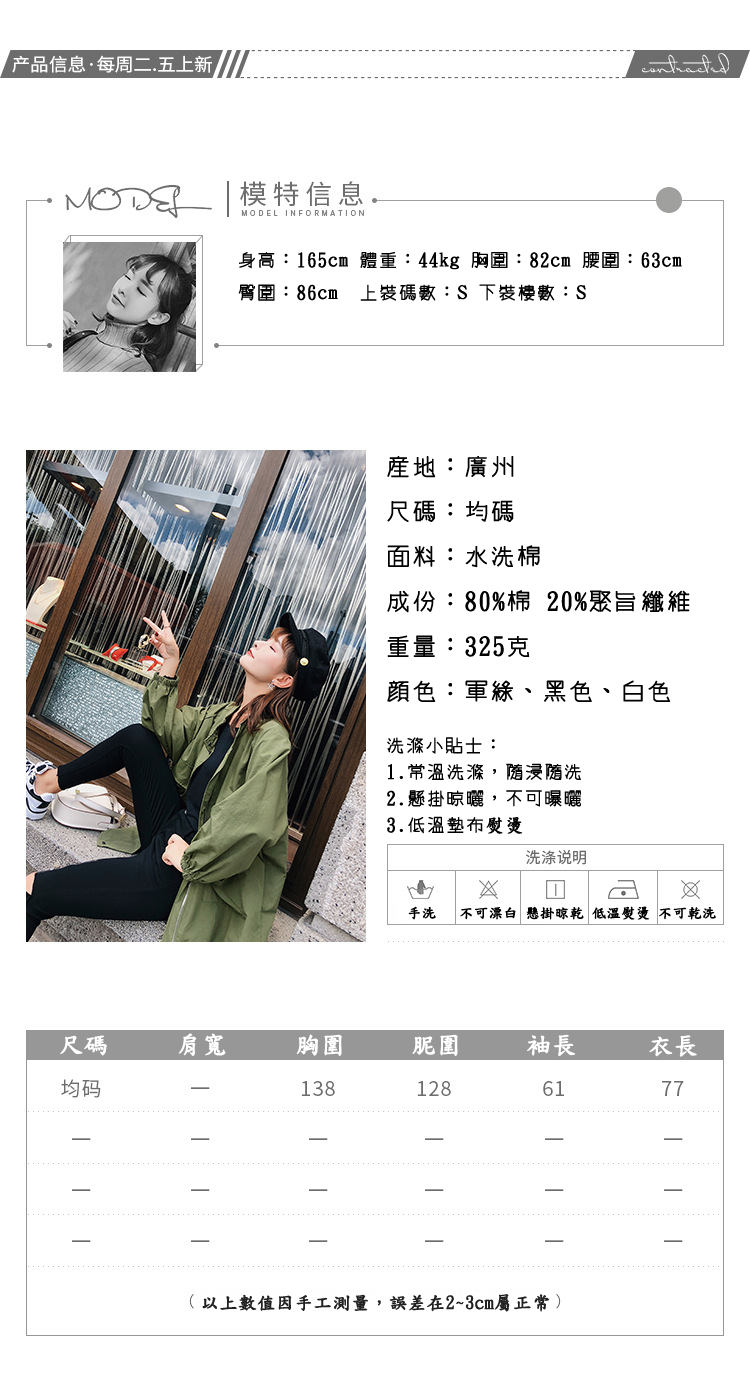
<style>
.page{position:relative;width:750px;height:1394px;background:#ffffff}
.page>*{position:absolute;margin:0}
.t1{font:18px "winman-tun33014";letter-spacing:0.05em;color:#000000;font-weight:bold}
.t2{font:24px "winman-tun33014";letter-spacing:0.05em;color:#000000;font-weight:bold}
.t3{font:18px "DFKaiShu-SB-Estd-BF";letter-spacing:0.05em;color:#000000;font-weight:bold}
.t4{font:14px "DFKaiShu-SB-Estd-BF";letter-spacing:0.01em;color:#000000;font-weight:bold}
.t5{font:24px "DFKaiShu-SB-Estd-BF";letter-spacing:0.01em;color:#ffffff;font-weight:bold}
.t6{font:18px "DFKaiShu-SB-Estd-BF";letter-spacing:0.01em;color:#212121;font-weight:bold}
</style>
<div class="page">
<p class="t1" style="left:238px;top:252px;width:444px;height:49px">身高：165cm 體重：44kg 胸圍：82cm 腰圍：63cm<br><br><br>臀圍：86cm  上裝碼數：S 下裝樓數：S</p>
<p class="t2" style="left:387px;top:456px;width:303px;height:246px">產地：廣州<br>尺碼：均碼<br>面料：水洗棉<br>成份：80%棉 20%聚旨纖維<br>重量：325克<br>顏色：軍綠、黑色、白色</p>
<p class="t1" style="left:387px;top:737px;width:194px;height:97px">洗滌小貼士：<br>1.常溫洗滌，隨浸隨洗<br>2.懸掛晾曬，不可曝曬<br>3.低溫墊布<span class="t3">熨燙</span></p>
<p class="t4" style="left:408px;top:906px;width:308px;height:14px">手洗   不可漂白 懸掛晾乾 低溫熨燙 不可乾洗</p>
<p class="t5" style="left:60px;top:1035px;width:47px;height:21px">尺碼</p>
<p class="t5" style="left:178px;top:1033px;width:48px;height:23px">肩寬</p>
<p class="t5" style="left:296px;top:1034px;width:46px;height:22px">胸圍</p>
<p class="t5" style="left:412px;top:1034px;width:46px;height:22px">胒圍</p>
<p class="t5" style="left:527px;top:1034px;width:49px;height:23px">袖長</p>
<p class="t5" style="left:649px;top:1035px;width:48px;height:22px">衣長</p>
<p class="t6" style="left:202px;top:1294px;width:348px;height:18px">以上數值因手工測量，誤差在2~3cm屬正常</p>
</div>
